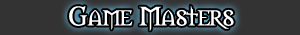
<style>
.page{position:relative;width:300px;height:35px;background:#333333}
.page>*{position:absolute;margin:0}
.t1{font:25px "Morpheus";color:#ffffff;scale:1.1 1}
</style>
<div class="page">
<p class="t1" style="left:69px;top:5px;width:165px;height:26px">Game Masters</p>
</div>
